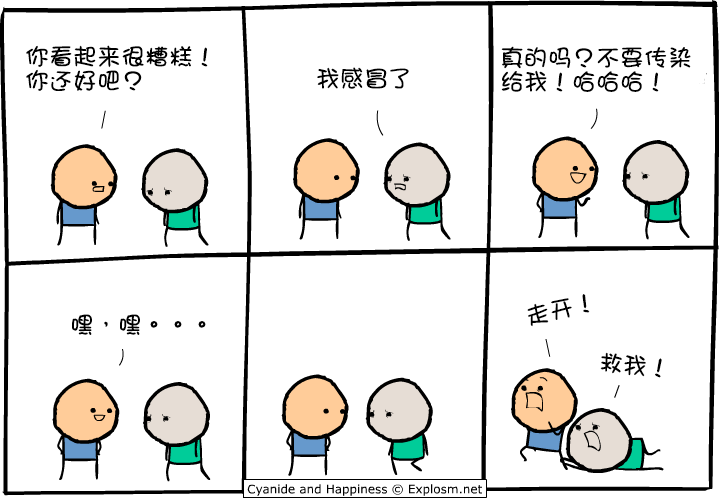
<style>
.page{position:relative;width:720px;height:500px;background:#ffffff}
.page>*{position:absolute;margin:0}
.t1{font:24px/24px "DFGirl";color:#000000}
.t2{font:24px "DFGirl";color:#000000}
</style>
<div class="page">
<p class="t1" style="left:26px;top:45px;width:182px;height:46px">你看起来很糟糕！<br>你还好吧？</p>
<p class="t1" style="left:501px;top:46px;width:190px;height:46px">真的吗？不要传染<br>给我！哈哈哈！</p>
<p class="t2" style="left:317px;top:67px;width:92px;height:22px">我感冒了</p>
<p class="t2" style="left:527px;top:294px;width:63px;height:33px;rotate:-14deg">走开！</p>
<p class="t2" style="left:72px;top:314px;width:134px;height:21px">嘿，嘿。。。</p>
<p class="t2" style="left:600px;top:352px;width:62px;height:26px;rotate:4deg">救我！</p>
</div>
